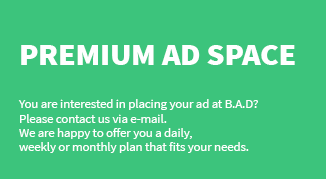
<style>
.page{position:relative;width:326px;height:179px;background:#3cc47c}
.page>*{position:absolute;margin:0}
.t1{font:12px "SourceSansPro-Regular";color:#ffffff;scale:1.05 1}
.t2{font:30px "SourceSansPro-Black";color:#ffffff;scale:1.05 1}
</style>
<div class="page">
<p class="t1" style="left:18px;top:45px;width:277px;height:108px"><span class="t2">PREMIUM AD SPACE<br><br><br></span>You are interested in placing your ad at B.A.D?<br>Please contact us via e-mail.<br>We are happy to offer you a daily,<br>weekly or monthly plan that fits your needs.</p>
</div>
